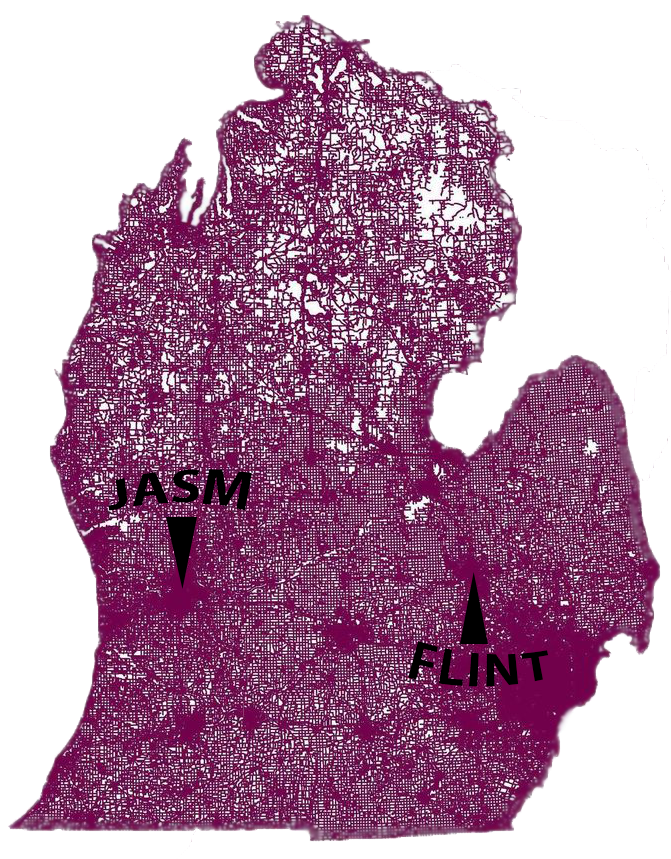
<style>
.page{position:relative;width:671px;height:859px;background:#ffffff}
.page>*{position:absolute;margin:0}
.t1{font:48px "MyriadPro-Bold";color:#000000}
.t2{font:48px "MyriadPro-Bold";color:#000000;text-transform:uppercase}
</style>
<div class="page">
<p class="t1" style="left:108px;top:469px;width:144px;height:42px">JASM</p>
<p class="t2" style="left:408px;top:641px;width:141px;height:46px">FLINT</p>
</div>
